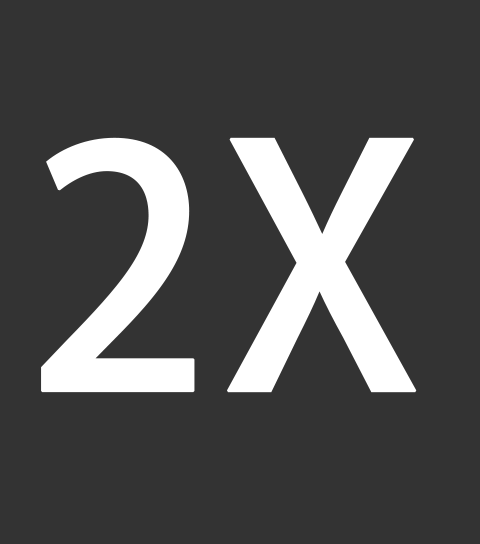
<style>
.page{position:relative;width:480px;height:544px;background:#333333}
.page>*{position:absolute;margin:0}
.t1{font:329px "AdobeHeitiStd-Regular";color:#ffffff;font-weight:bold}
</style>
<div class="page">
<p class="t1" style="left:41px;top:137px;width:376px;height:256px">2X</p>
</div>
